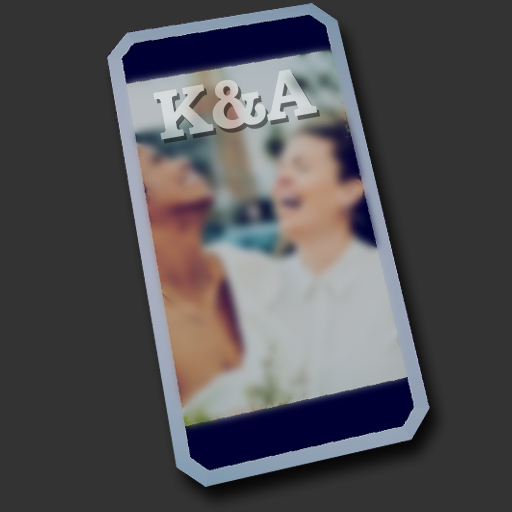
<style>
.page{position:relative;width:512px;height:512px;background:#333333}
.page>*{position:absolute;margin:0}
.t1{font:69.4px "BookmanOldStyle-Bold"}
</style>
<div class="page">
<p class="t1" style="left:153px;top:69px;width:164px;height:71px;rotate:-10deg">K&amp;A</p>
</div>
